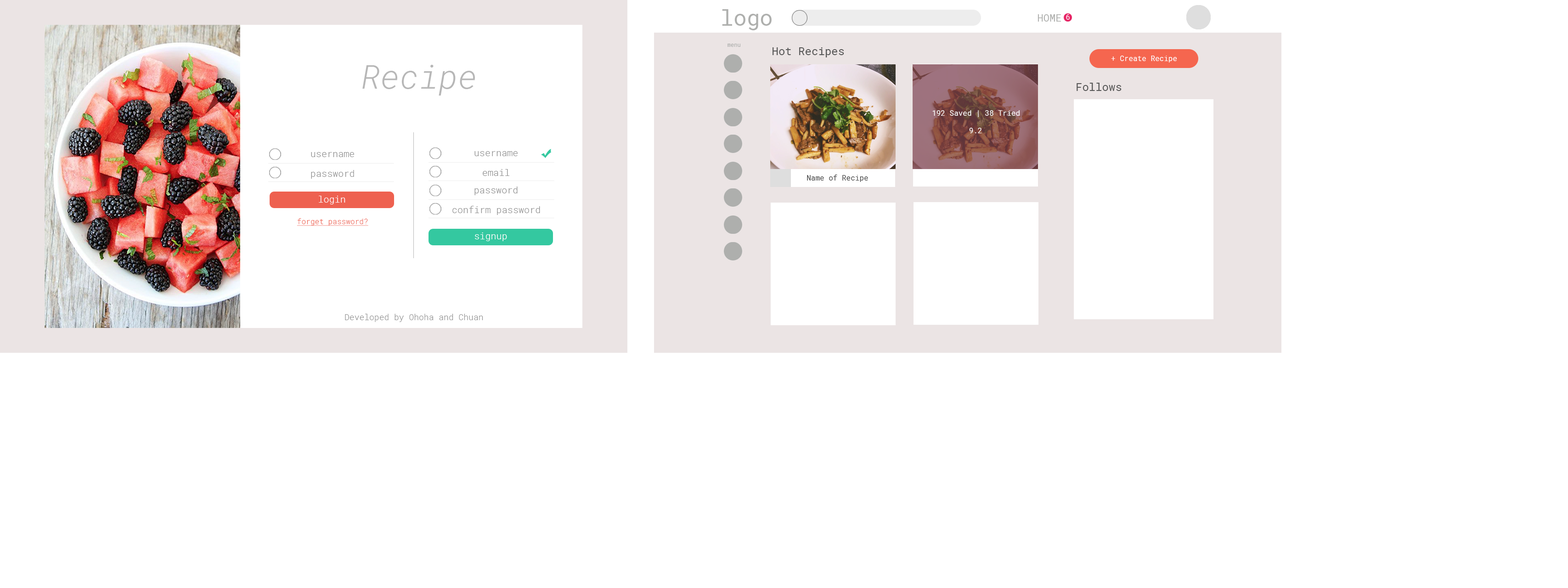
<style>
.page{position:relative;width:1568px;height:588px;background:#ffffff}
.page>*{position:absolute;margin:0}
.t1{font:22px "RobotoMono-Regular";color:#aeafad}
.t2{font:10.1px "RobotoMono-Regular";color:#aeafad}
.t3{font:5.5px "RobotoMono-Regular";color:#aeafad}
.t4{font:11px "RobotoMono-Regular";color:#565656}
.t5{font:33.1px "RobotoMono-LightItalic";color:#b7b7b7}
.t6{font:7.3px "RobotoMono-Regular";color:#ffffff}
.t7{font:9.3px "RobotoMono-Light";color:#909090}
.t8{font:7.3px "RobotoMono-Regular";color:#434343}
.t9{font:9.3px "RobotoMono-Light";color:#ffffff}
.t10{font:7.4px "RobotoMono-Light";color:#ee6150;text-decoration:underline}
.t11{font:8.3px "RobotoMono-Light";color:#909090}
</style>
<div class="page">
<p class="t1" style="left:722px;top:9px;width:50px;height:21px">logo</p>
<p class="t2" style="left:1038px;top:14px;width:23px;height:8px">HOME</p>
<p class="t3" style="left:728px;top:44px;width:12px;height:3px">menu</p>
<p class="t4" style="left:773px;top:47px;width:71px;height:10px">Hot Recipes</p>
<p class="t5" style="left:362px;top:65px;width:113px;height:31px">Recipe</p>
<p class="t6" style="left:1111px;top:56px;width:66px;height:6px">+ Create Recipe</p>
<p class="t4" style="left:1077px;top:83px;width:45px;height:8px">Follows</p>
<p class="t6" style="left:932px;top:110px;width:88px;height:7px">192 Saved | 38 Tried</p>
<p class="t6" style="left:969px;top:128px;width:13px;height:5px">9.2</p>
<p class="t7" style="left:311px;top:152px;width:43px;height:5px">username</p>
<p class="t7" style="left:474px;top:151px;width:44px;height:5px">username</p>
<p class="t7" style="left:311px;top:170px;width:43px;height:9px">password</p>
<p class="t7" style="left:483px;top:169px;width:26px;height:7px">email</p>
<p class="t8" style="left:807px;top:175px;width:61px;height:7px">Name of Recipe</p>
<p class="t9" style="left:319px;top:196px;width:26px;height:8px">login</p>
<p class="t7" style="left:474px;top:186px;width:44px;height:9px">password</p>
<p class="t7" style="left:452px;top:206px;width:88px;height:9px">confirm password</p>
<p class="t10" style="left:297px;top:218px;width:71px;height:8px">forget password?</p>
<p class="t9" style="left:475px;top:232px;width:32px;height:9px">signup</p>
<p class="t11" style="left:345px;top:314px;width:138px;height:8px">Developed by Ohoha and Chuan</p>
</div>
